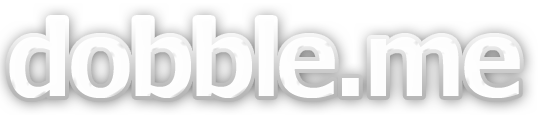
<style>
.page{position:relative;width:541px;height:115px}
.page>*{position:absolute;margin:0}
.t1{font:100px "MeiryoUI-Bold";letter-spacing:-0.05em;color:#ffffff}
</style>
<div class="page">
<p class="t1" style="left:9px;top:19px;width:511px;height:79px">dobble.me</p>
</div>
